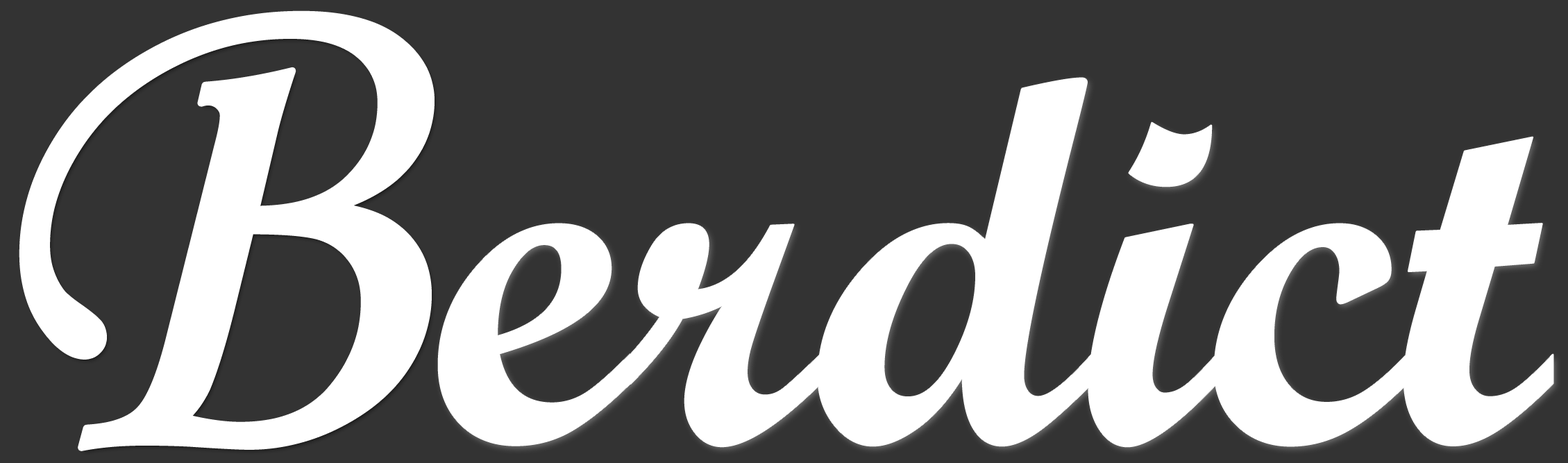
<style>
.page{position:relative;width:1568px;height:463px;background:#333333}
.page>*{position:absolute;margin:0}
.t1{font:723px "MonotypeCorsiva";letter-spacing:0.03em;color:#ffffff}
.t2{font:520.6px "ScriptMTBold";color:#ffffff}
.t3{font:607.3px "ScriptMTBold";color:#ffffff}
</style>
<div class="page">
<p class="t1" style="left:22px;top:14px;width:409px;height:434px">B</p>
<p class="t2" style="left:438px;top:78px;width:1115px;height:369px"><span class="t3">    </span>erdict</p>
</div>
